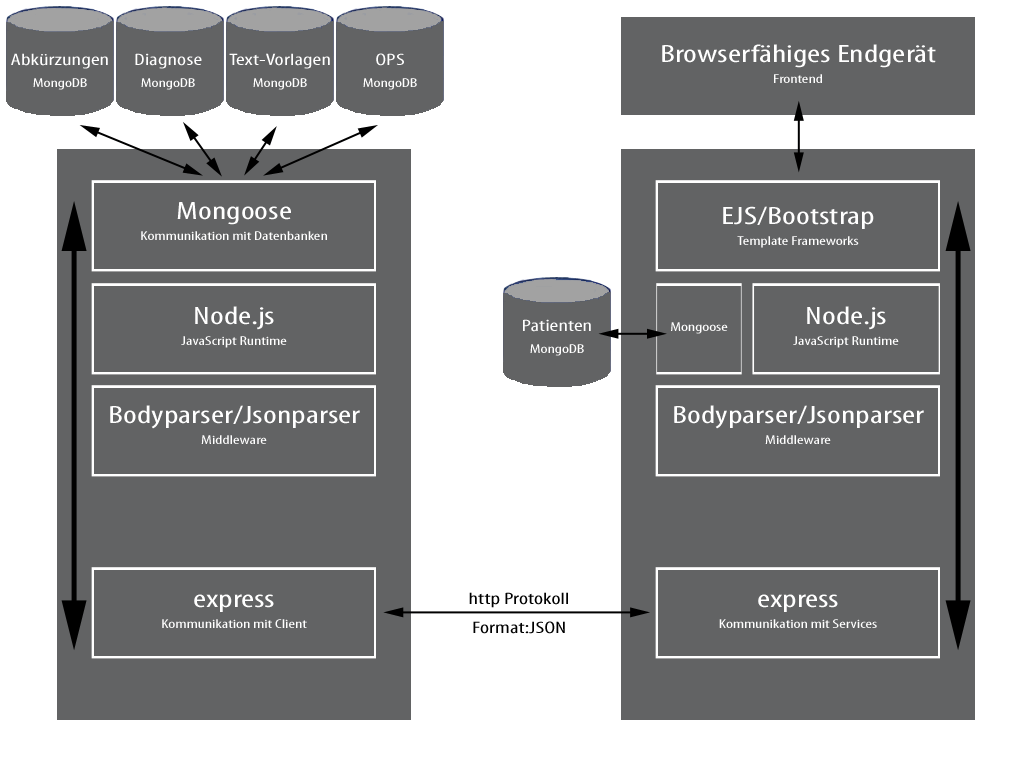
<style>
.page{position:relative;width:1024px;height:768px;background:#626364}
.page>*{position:absolute;margin:0}
.t1{font:16.8px "MyriadPro-Cond";color:#ffffff;scale:1.43 1}
.t2{font:12.6px "MyriadPro-Cond";color:#ffffff;scale:1.43 1}
.t3{font:25.2px "MyriadPro-Cond";color:#ffffff;scale:1.43 1}
.t4{font:16.8px "MyriadPro-Cond";color:#000000;scale:1.43 1}
</style>
<div class="page">
<p class="t1" style="left:11px;top:53px;width:97px;height:37px;text-align:center">Abkürzungen<br><span class="t2">MongoDB</span></p>
<p class="t1" style="left:135px;top:53px;width:67px;height:37px;text-align:center">Diagnose<br><span class="t2">MongoDB</span></p>
<p class="t1" style="left:229px;top:53px;width:101px;height:37px;text-align:center">Text-Vorlagen<br><span class="t2">MongoDB</span></p>
<p class="t2" style="left:363px;top:53px;width:54px;height:37px;text-align:center"><span class="t1">OPS<br></span>MongoDB</p>
<p class="t3" style="left:662px;top:44px;width:274px;height:39px;text-align:center">Browserfähiges Endgerät<br><span class="t2">Frontend</span></p>
<p class="t2" style="left:141px;top:202px;width:186px;height:38px;text-align:center"><span class="t3">Mongoose<br></span>Kommunikation mit Datenbanken</p>
<p class="t2" style="left:723px;top:206px;width:151px;height:42px;text-align:center"><span class="t3">EJS/Bootstrap<br></span>Template Frameworks</p>
<p class="t2" style="left:181px;top:306px;width:106px;height:42px;text-align:center"><span class="t3">Node.js<br></span>JavaScript Runtime</p>
<p class="t2" style="left:793px;top:306px;width:106px;height:42px;text-align:center"><span class="t3">Node.js<br></span>JavaScript Runtime</p>
<p class="t1" style="left:523px;top:319px;width:68px;height:37px;text-align:center">Patienten<br><span class="t2">MongoDB</span></p>
<p class="t2" style="left:671px;top:322px;width:57px;height:12px">Mongoose</p>
<p class="t3" style="left:110px;top:405px;width:250px;height:39px;text-align:center">Bodyparser/Jsonparser<br><span class="t2">Middleware</span></p>
<p class="t3" style="left:674px;top:405px;width:250px;height:39px;text-align:center">Bodyparser/Jsonparser<br><span class="t2">Middleware</span></p>
<p class="t4" style="left:469px;top:592px;width:99px;height:42px;text-align:center">http Protokoll<br>Format:JSON</p>
<p class="t2" style="left:162px;top:594px;width:145px;height:34px;text-align:center"><span class="t3">express<br></span>Kommunikation mit Client</p>
<p class="t2" style="left:719px;top:594px;width:158px;height:34px;text-align:center"><span class="t3">express<br></span>Kommunikation mit Services</p>
</div>
